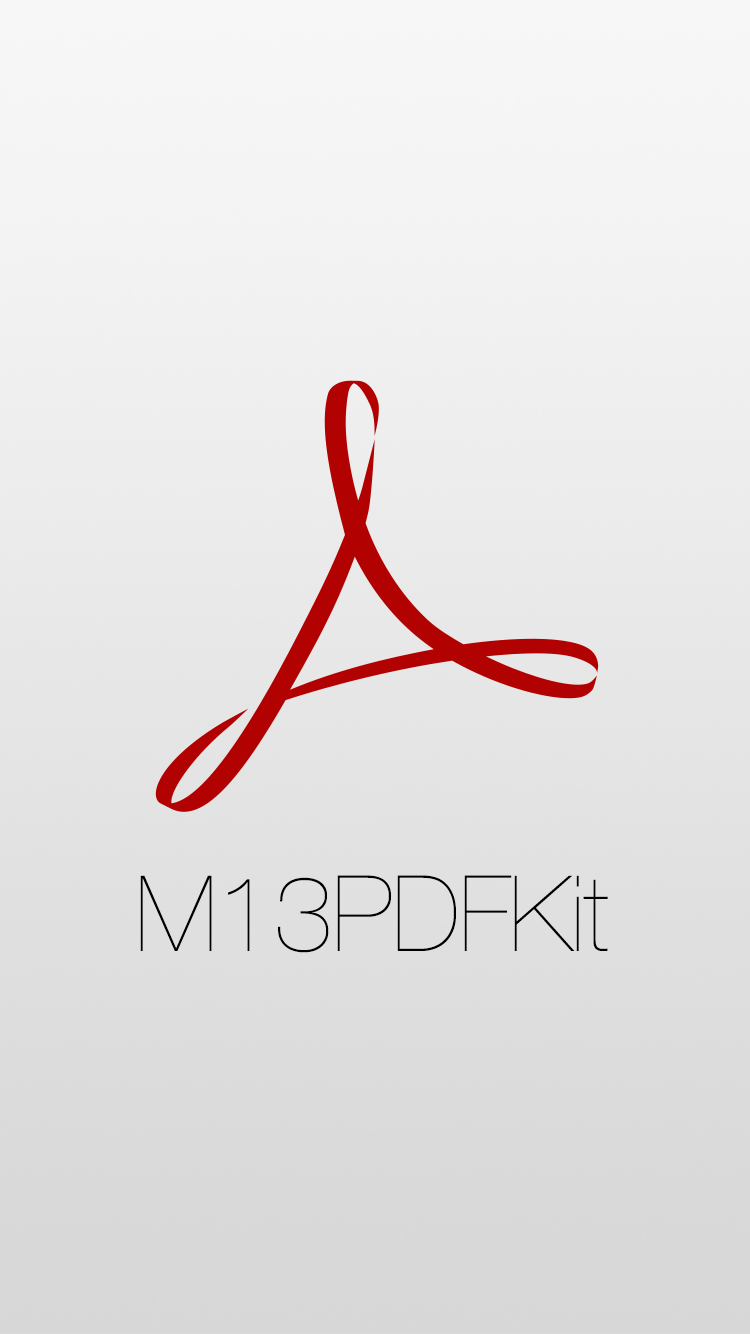
<style>
.page{position:relative;width:750px;height:1334px}
.page>*{position:absolute;margin:0}
.t1{font:105.4px "HelveticaNeue-UltraLight";letter-spacing:-0.007em;color:#000000}
</style>
<div class="page">
<p class="t1" style="left:140px;top:875px;width:468px;height:78px">M13PDFKit</p>
</div>
